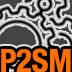
<style>
.page{position:relative;width:72px;height:72px}
.page>*{position:absolute;margin:0}
.t1{font:32px "HelveticaNeue-CondensedBold";color:#ff6f00}
</style>
<div class="page">
<p class="t1" style="left:1px;top:48px;width:70px;height:25px">P2SM</p>
</div>
